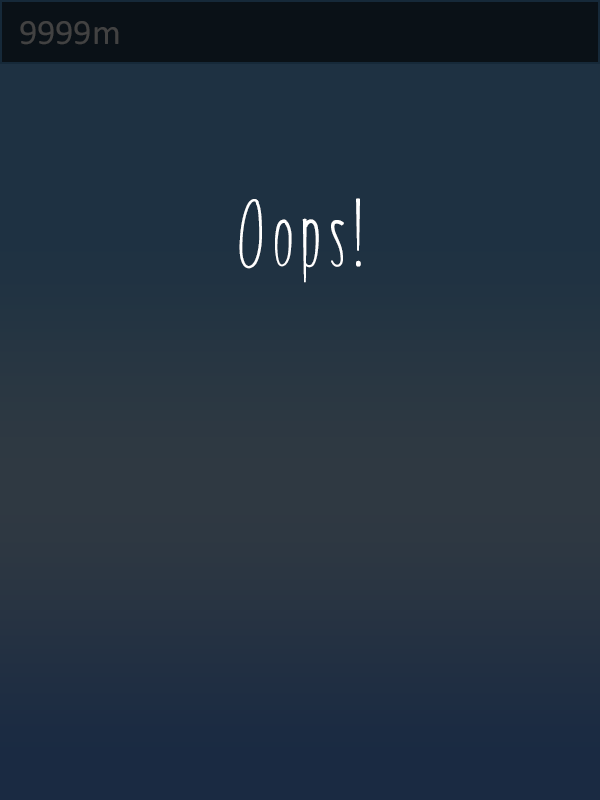
<style>
.page{position:relative;width:600px;height:800px;background:#1e3142}
.page>*{position:absolute;margin:0}
.t1{font:36px "Calibri";color:#424242}
.t2{font:96px "MRF-Pixeldust";color:#ffffff}
</style>
<div class="page">
<p class="t1" style="left:20px;top:21px;width:99px;height:24px">9999m</p>
<p class="t2" style="left:239px;top:198px;width:122px;height:85px">Oops!</p>
</div>
